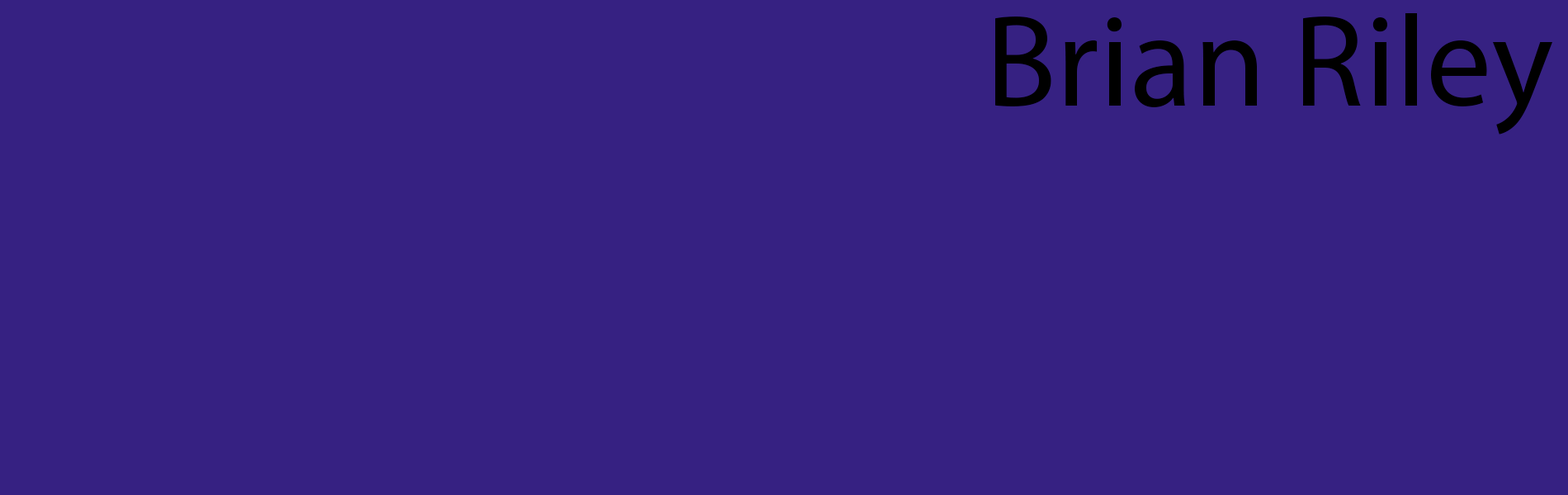
<style>
.page{position:relative;width:1568px;height:495px;background:#362182}
.page>*{position:absolute;margin:0}
.t1{font:130.7px "MyriadPro-Regular";color:#000000}
</style>
<div class="page">
<p class="t1" style="left:995px;top:13px;width:557px;height:122px">Brian Riley</p>
</div>
